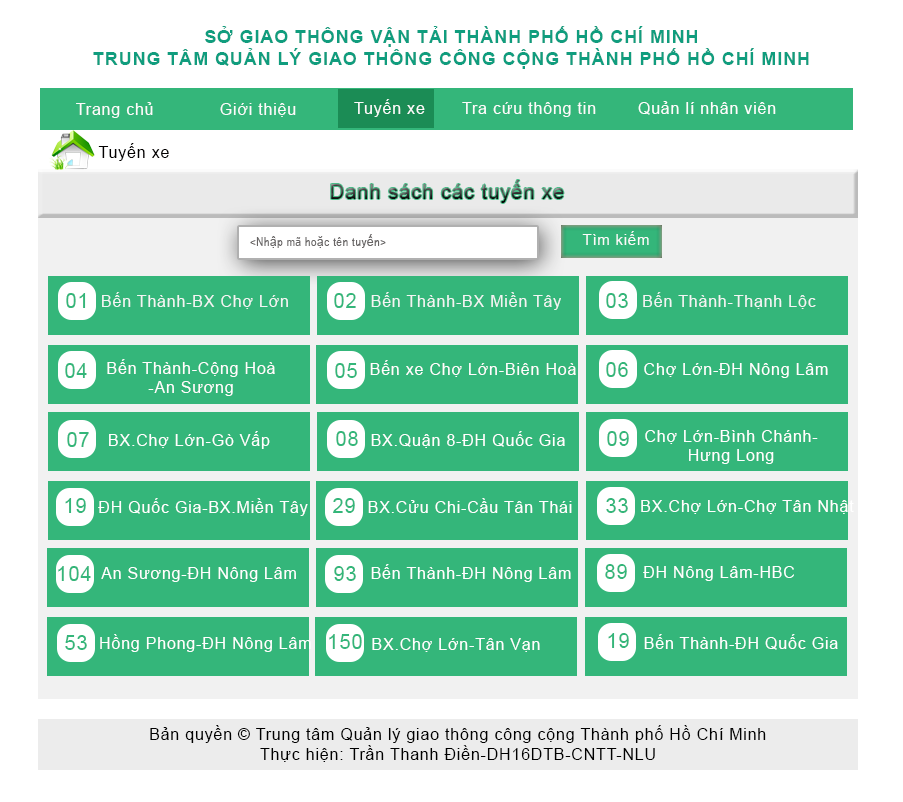
<style>
.page{position:relative;width:903px;height:802px;background:#34b67a}
.page>*{position:absolute;margin:0}
.t1{font:18px "Arial-BoldMT";letter-spacing:0.05em;color:#109d7e}
.t2{font:16px "ArialMT";letter-spacing:0.05em;color:#fbfbfb}
.t3{font:16px "ArialMT";letter-spacing:0.05em;color:#fefefe}
.t4{font:16px "ArialMT";letter-spacing:0.05em;color:#020000}
.t5{font:20px "ArialMT";letter-spacing:0.05em}
.t6{font:15px "ArialMT";letter-spacing:0.05em;color:#fbfbfb}
.t7{font:12px "ArialNarrow";letter-spacing:0.05em;color:#686565}
.t8{font:12px "ArialMT";letter-spacing:0.05em;color:#686565}
.t9{font:20px "ArialMT";letter-spacing:0.05em;color:#34b67a}
.t10{font:16px "ArialMT";letter-spacing:0.05em;color:#f3f5f4}
.t11{font:16px "ArialMT";letter-spacing:0.05em;color:#fffdfd}
.t12{font:16px "ArialMT";letter-spacing:0.05em;color:#ffffff}
.t13{font:16px "ArialMT";letter-spacing:0.05em;color:#000000}
</style>
<div class="page">
<p class="t1" style="left:93px;top:26px;width:716px;height:43px;text-align:center">SỞ GIAO THÔNG VẬN TẢI THÀNH PHỐ HỒ CHÍ MINH<br>TRUNG TÂM QUẢN LÝ GIAO THÔNG CÔNG CỘNG THÀNH PHỐ HỒ CHÍ MINH</p>
<p class="t2" style="left:76px;top:102px;width:220px;height:16px">Trang chủ  Giới thiệu</p>
<p class="t2" style="left:354px;top:99px;width:242px;height:18px">Tuyến xe  Tra cứu thông tin</p>
<p class="t3" style="left:638px;top:101px;width:138px;height:14px">Quản lí nhân viên</p>
<p class="t4" style="left:98px;top:143px;width:71px;height:18px">Tuyến xe</p>
<p class="t5" style="left:331px;top:180px;width:233px;height:23px">Danh sách các tuyến xe</p>
<p class="t6" style="left:582px;top:231px;width:67px;height:14px">Tìm kiếm</p>
<p class="t7" style="left:250px;top:234px;width:136px;height:14px">&lt;Nh<span class="t8">ậ</span>p mã ho<span class="t8">ặ</span>c tên tuy<span class="t8">ế</span>n&gt;</p>
<p class="t9" style="left:66px;top:293px;width:20px;height:15px">01</p>
<p class="t10" style="left:102px;top:292px;width:186px;height:17px">Bến Thành-BX Chợ Lớn</p>
<p class="t9" style="left:334px;top:293px;width:22px;height:15px">02</p>
<p class="t10" style="left:371px;top:292px;width:190px;height:18px">Bến Thành-BX Miền Tây</p>
<p class="t9" style="left:606px;top:293px;width:22px;height:15px">03</p>
<p class="t10" style="left:643px;top:292px;width:173px;height:17px">Bến Thành-Thạnh Lộc</p>
<p class="t9" style="left:65px;top:363px;width:22px;height:15px">04</p>
<p class="t11" style="left:107px;top:359px;width:168px;height:37px;text-align:center">Bến Thành-Cộng Hoà<br>-An Sương</p>
<p class="t9" style="left:335px;top:363px;width:22px;height:15px">05</p>
<p class="t11" style="left:370px;top:360px;width:206px;height:17px">Bến xe Chợ Lớn-Biên Hoà</p>
<p class="t9" style="left:606px;top:362px;width:22px;height:15px">06</p>
<p class="t12" style="left:644px;top:363px;width:184px;height:15px">Chợ Lớn-ĐH Nông Lâm</p>
<p class="t9" style="left:67px;top:432px;width:22px;height:15px">07</p>
<p class="t12" style="left:109px;top:431px;width:161px;height:18px">BX.Chợ Lớn-Gò Vấp</p>
<p class="t9" style="left:336px;top:431px;width:22px;height:15px">08</p>
<p class="t12" style="left:371px;top:431px;width:194px;height:17px">BX.Quận 8-ĐH Quốc Gia</p>
<p class="t9" style="left:607px;top:431px;width:22px;height:15px">09</p>
<p class="t12" style="left:645px;top:430px;width:173px;height:34px;text-align:center">Chợ Lớn-Bình Chánh-<br>Hưng Long</p>
<p class="t9" style="left:65px;top:498px;width:21px;height:15px">19</p>
<p class="t12" style="left:98px;top:498px;width:210px;height:18px">ĐH Quốc Gia-BX.Miền Tây</p>
<p class="t9" style="left:333px;top:498px;width:22px;height:15px">29</p>
<p class="t12" style="left:368px;top:498px;width:204px;height:15px">BX.Cửu Chi-Cầu Tân Thái</p>
<p class="t9" style="left:606px;top:498px;width:22px;height:15px">33</p>
<p class="t12" style="left:641px;top:500px;width:213px;height:14px">BX.Chợ Lớn-Chợ Tân Nhật</p>
<p class="t9" style="left:58px;top:566px;width:33px;height:15px">104</p>
<p class="t12" style="left:101px;top:567px;width:195px;height:15px">An Sương-ĐH Nông Lâm</p>
<p class="t9" style="left:334px;top:566px;width:22px;height:15px">93</p>
<p class="t12" style="left:371px;top:564px;width:200px;height:18px">Bến Thành-ĐH Nông Lâm</p>
<p class="t9" style="left:605px;top:564px;width:22px;height:15px">89</p>
<p class="t12" style="left:643px;top:566px;width:151px;height:15px">ĐH Nông Lâm-HBC</p>
<p class="t9" style="left:65px;top:635px;width:22px;height:15px">53</p>
<p class="t12" style="left:75px;top:634px;width:236px;height:18px">Lê Hồng Phong-ĐH Nông Lâm</p>
<p class="t9" style="left:329px;top:634px;width:33px;height:15px">150</p>
<p class="t12" style="left:372px;top:638px;width:168px;height:14px">BX.Chợ Lớn-Tân Vạn</p>
<p class="t9" style="left:608px;top:633px;width:21px;height:15px">19</p>
<p class="t12" style="left:644px;top:634px;width:194px;height:16px">Bến Thành-ĐH Quốc Gia</p>
<p class="t13" style="left:150px;top:725px;width:616px;height:37px;text-align:center">Bản quyền © Trung tâm Quản lý giao thông công cộng Thành phố Hồ Chí Minh <br>Thực hiện: Trần Thanh Điền-DH16DTB-CNTT-NLU</p>
</div>
